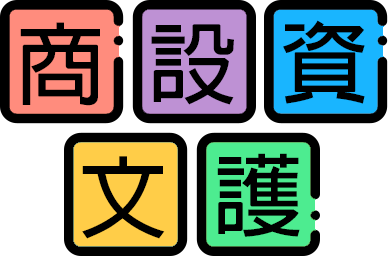
<style>
.page{position:relative;width:388px;height:256px;background:#000000}
.page>*{position:absolute;margin:0}
.t1{font:88.9px "AdobeFanHeitiStd-Bold";color:#000000}
</style>
<div class="page">
<p class="t1" style="left:20px;top:22px;width:80px;height:84px">商</p>
<p class="t1" style="left:151px;top:24px;width:83px;height:81px">設</p>
<p class="t1" style="left:283px;top:20px;width:82px;height:84px">資</p>
<p class="t1" style="left:82px;top:156px;width:83px;height:83px">文</p>
<p class="t1" style="left:217px;top:153px;width:83px;height:84px">護</p>
</div>
